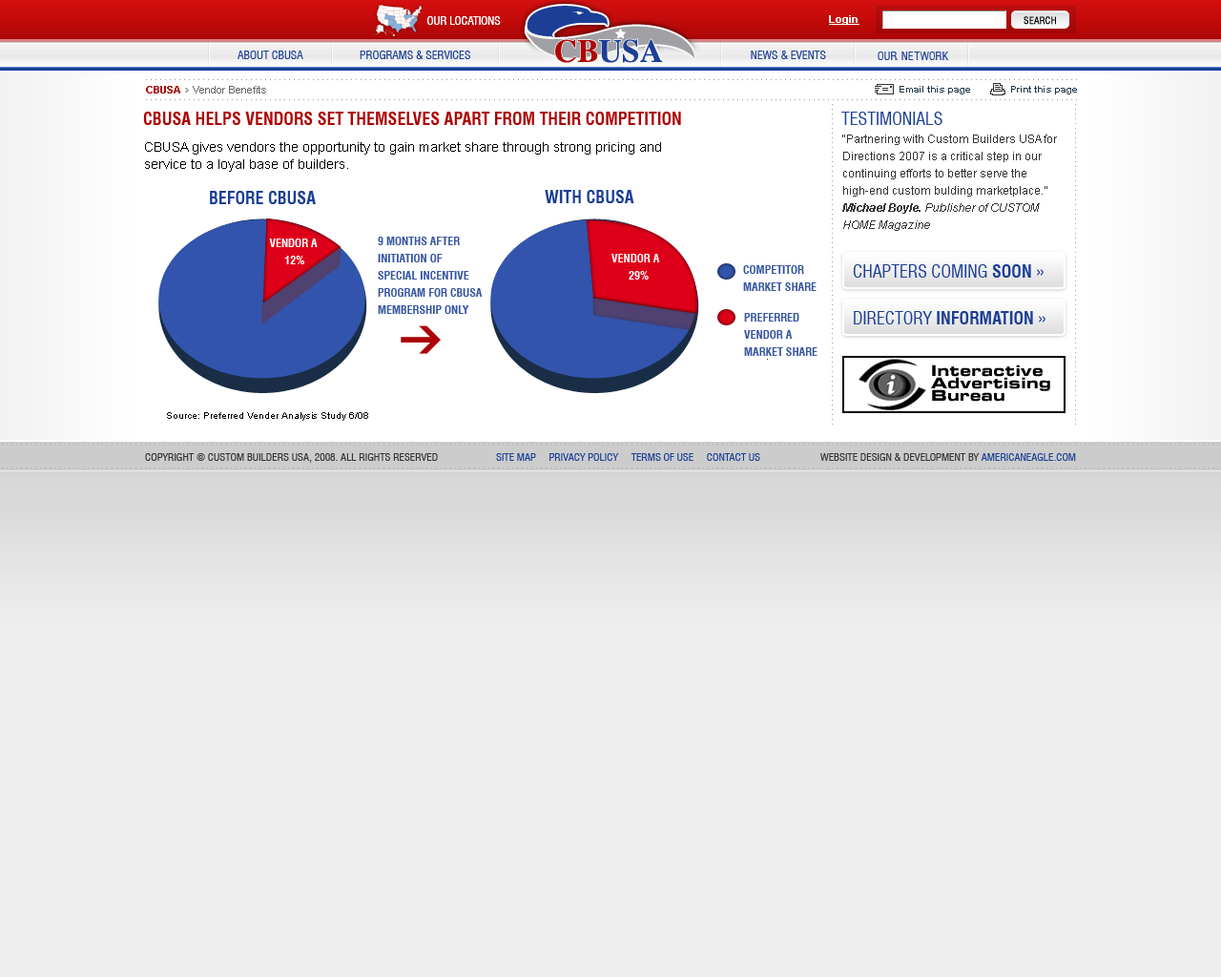
<style>
.page{position:relative;width:1221px;height:977px;background:#eeeeee}
.page>*{position:absolute;margin:0}
.t1{font:11.4px "Swiss721BT-RomanCondensed";letter-spacing:-0.002em;color:#ffffff;text-transform:uppercase}
.t2{font:10.5px "Arial-BoldMT";color:#fffffe;text-decoration:underline}
.t3{font:9.5px "Swiss721BT-RomanCondensed";color:#000000;text-transform:uppercase;font-weight:bold}
.t4{font:10.5px "ArialMT";color:#666666}
.t5{font:10.5px "Arial-BoldMT";color:#ad0505}
.t6{font:9.5px "Arial-BoldMT";color:#1f3749}
.t7{font:17.2px "Swiss721BT-BoldCondensed";color:#ad0505;text-transform:uppercase}
.t8{font:17.2px "Swiss721BT-RomanCondensed";color:#1c3f95;text-transform:uppercase}
.t9{font:11.4px/17.2px "ArialMT";color:#333333}
.t10{font:11.4px/17.2px "Arial-BoldItalicMT";color:#333333}
.t11{font:11.4px/17.2px "Arial-ItalicMT";color:#333333}
.t12{font:10.5px/17.2px "ArialMT";color:#ad0505;text-decoration:underline}
.t13{font:13.4px/17.2px "ArialMT";color:#000000}
.t14{font:17.2px "Swiss721BT-BoldCondensed";color:#1c3f95;text-transform:uppercase}
.t15{font:11.4px/17.2px "Swiss721BT-BoldCondensed";color:#ffffff;text-transform:uppercase}
.t16{font:11.4px/17.2px "Swiss721BT-BoldCondensed";color:#3756a0;text-transform:uppercase}
.t17{font:9.5px "ArialMT";color:#000000}
.t18{font:10.5px "Swiss721BT-RomanCondensed";color:#333333;text-transform:uppercase}
.t19{font:10.5px "Swiss721BT-RomanCondensed";color:#1c3f95;text-transform:uppercase}
</style>
<div class="page">
<p class="t1" style="left:427px;top:16px;width:74px;height:9px;opacity:0.75">Our Locations</p>
<p class="t1" style="left:427px;top:16px;width:74px;height:9px">Our Locations</p>
<p class="t2" style="left:829px;top:15px;width:30px;height:10px">Login</p>
<p class="t3" style="left:1023px;top:16px;width:33px;height:9px">Search</p>
<p class="t4" style="left:146px;top:86px;width:120px;height:7px"><span class="t5">CBUSA</span>    Vendor Benefits</p>
<p class="t6" style="left:899px;top:86px;width:71px;height:8px">Email this page</p>
<p class="t6" style="left:1011px;top:86px;width:66px;height:8px">Print this page</p>
<p class="t7" style="left:143px;top:112px;width:538px;height:13px">CBUSA HELPS VENDORS SET THEMSELVES APART FROM THEIR COMPETITION</p>
<p class="t8" style="left:841px;top:112px;width:101px;height:13px">Testimonials</p>
<p class="t9" style="left:842px;top:134px;width:215px;height:97px">“Partnering with Custom Builders USA for Directions 2007 is a critical step in our continuing efforts to better serve the high-end custom bulding marketplace.”<br><span class="t10">Michael Boyle.</span><span class="t11"> Publisher of CUSTOM HOME Magazine<br></span><span class="t12">More Testimonials</span></p>
<p class="t13" style="left:145px;top:142px;width:516px;height:30px">CBUSA gives vendors the opportunity to gain market share through strong pricing and <br>service to a loyal base of builders.</p>
<p class="t14" style="left:210px;top:191px;width:106px;height:13px">Before CBUSA</p>
<p class="t14" style="left:545px;top:190px;width:89px;height:13px">with cbusa</p>
<p class="t15" style="left:269px;top:238px;width:49px;height:26px;text-align:center">vendor a <br>12%</p>
<p class="t16" style="left:378px;top:237px;width:105px;height:77px">9 Months after<br>initiation of <br>special incentive <br>program for cbusa <br>membership only</p>
<p class="t15" style="left:611px;top:254px;width:49px;height:25px">vendor a <br>      29%</p>
<p class="t16" style="left:743px;top:265px;width:73px;height:26px">competitor <br>market share</p>
<p class="t8" style="left:853px;top:264px;width:190px;height:14px">CHAPTERS COMING <span class="t14">SOON </span>»</p>
<p class="t16" style="left:744px;top:313px;width:73px;height:43px">preferred <br>vendor a <br>market share</p>
<p class="t14" style="left:854px;top:311px;width:191px;height:13px"><span class="t8">DIRECTORY </span>INFORMATION<span class="t8"> »</span></p>
<p class="t17" style="left:167px;top:412px;width:201px;height:9px">Source: Preferred Vender Analysis Study 6/08</p>
<p class="t18" style="left:145px;top:453px;width:293px;height:10px">Copyright © Custom Builders USA, 2008. All Rights Reserved</p>
<p class="t19" style="left:496px;top:453px;width:264px;height:8px">Site map     Privacy Policy     Terms of Use     Contact Us</p>
<p class="t18" style="left:820px;top:453px;width:256px;height:8px">Website Design &amp; Development by <span class="t19">Americaneagle.com</span></p>
</div>
